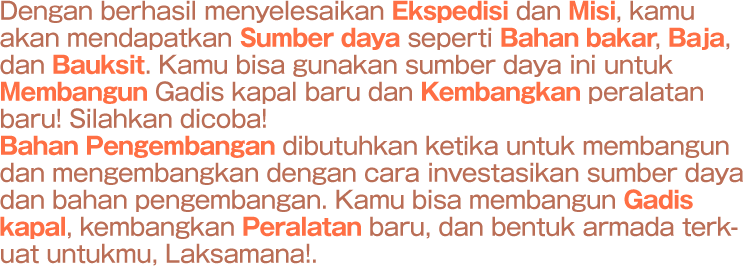
<style>
.page{position:relative;width:747px;height:273px;background:#ffffff}
.page>*{position:absolute;margin:0}
.t1{font:24px/27px "GothicMB101Pro-Medium";letter-spacing:-0.02em;color:#ba6e56;scale:0.95 1}
.t2{font:24px/27px "GothicMB101Pro-Bold";letter-spacing:-0.02em;color:#ff6f44;scale:0.95 1}
</style>
<div class="page">
<p class="t1" style="left:0px;top:0px;width:743px;height:266px">Dengan berhasil menyelesaikan <span class="t2">Ekspedisi</span> dan <span class="t2">Misi</span>, kamu <br>akan mendapatkan <span class="t2">Sumber daya </span>seperti <span class="t2">Bahan bakar</span>, <span class="t2">Baja</span>, <br>dan <span class="t2">Bauksit</span>. Kamu bisa gunakan sumber daya ini untuk <br><span class="t2">Membangun </span>Gadis kapal baru dan <span class="t2">Kembangkan </span>peralatan <br>baru! Silahkan dicoba!<br><span class="t2">Bahan Pengembangan</span> dibutuhkan ketika untuk membangun<br>dan mengembangkan dengan cara investasikan sumber daya<br>dan bahan pengembangan. Kamu bisa membangun <span class="t2">Gadis <br>kapal</span>, kembangkan <span class="t2">Peralatan </span>baru, dan bentuk armada terk-<br>uat untukmu, Laksamana!.</p>
</div>
